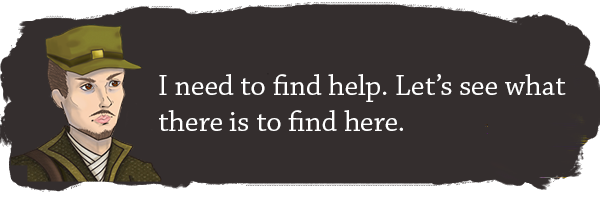
<style>
.page{position:relative;width:600px;height:200px;background:#342e2e}
.page>*{position:absolute;margin:0}
.t1{font:30px "ChaparralPro-Regular";color:#ffffff}
</style>
<div class="page">
<p class="t1" style="left:159px;top:74px;width:407px;height:57px">I need to find help. Let’s see what <br>there is to find here.</p>
</div>
